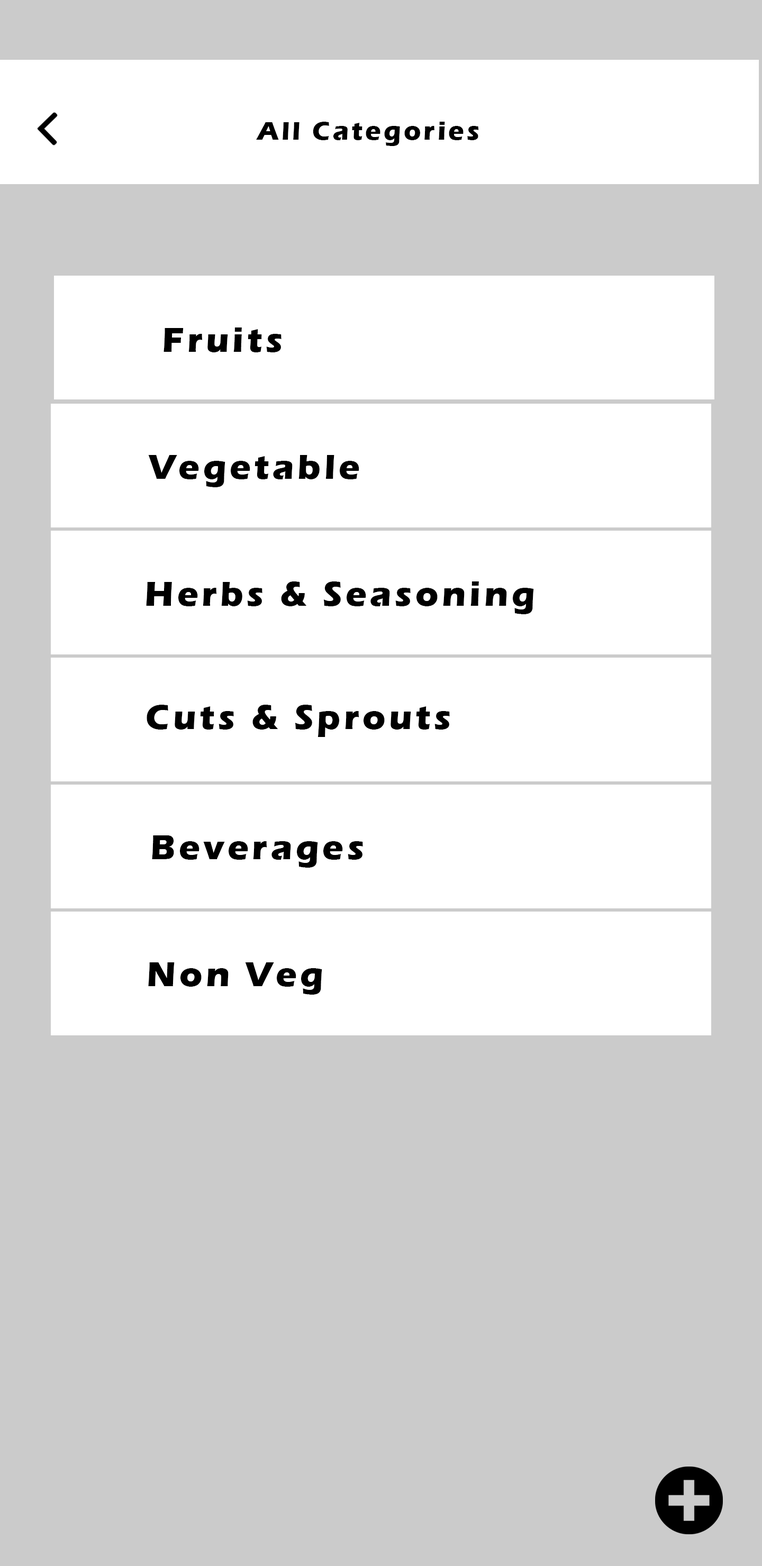
<style>
.page{position:relative;width:762px;height:1566px;background:#cbcbcb}
.page>*{position:absolute;margin:0}
.t1{font:26.4px "ErasITC-Bold";letter-spacing:0.1em;color:#000000}
.t2{font:35.3px "ErasITC-Bold";letter-spacing:0.1em;color:#000000}
</style>
<div class="page">
<p class="t1" style="left:256px;top:122px;width:223px;height:24px">All Categories</p>
<p class="t2" style="left:163px;top:327px;width:118px;height:25px">Fruits</p>
<p class="t2" style="left:148px;top:455px;width:211px;height:32px">Vegetable</p>
<p class="t2" style="left:146px;top:581px;width:388px;height:33px">Herbs &amp; Seasoning</p>
<p class="t2" style="left:147px;top:705px;width:303px;height:32px">Cuts &amp; Sprouts</p>
<p class="t2" style="left:152px;top:835px;width:211px;height:32px">Beverages</p>
<p class="t2" style="left:148px;top:962px;width:174px;height:32px">Non Veg</p>
</div>
